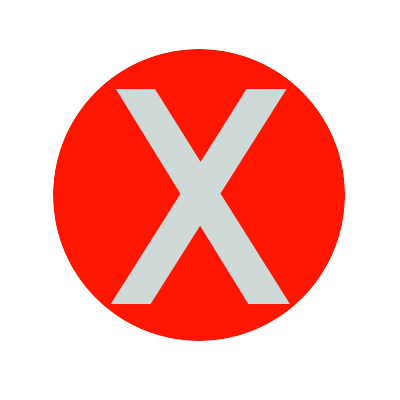
<style>
.page{position:relative;width:400px;height:400px;background:#ffffff}
.page>*{position:absolute;margin:0}
.t1{font:300px "TrebuchetMS-Bold";color:#ced9d7}
</style>
<div class="page">
<p class="t1" style="left:110px;top:89px;width:180px;height:215px">X</p>
</div>
